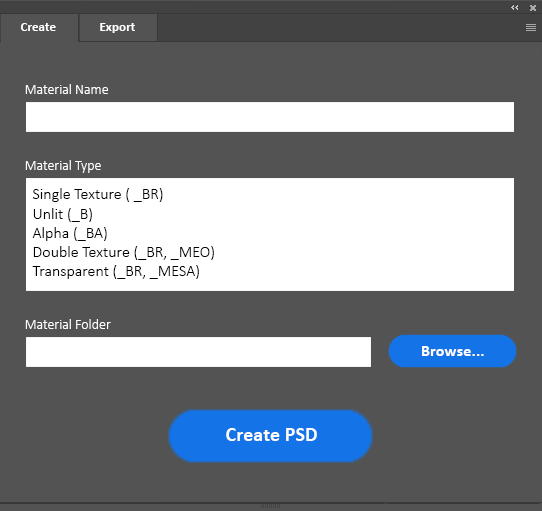
<style>
.page{position:relative;width:542px;height:511px;background:#535353}
.page>*{position:absolute;margin:0}
.t1{font:13.2px "Calibri-Bold";color:#ffffff}
.t2{font:14px "Calibri-Light";color:#ffffff}
.t3{font:16px "Calibri-Light";color:#000000}
.t4{font:16.4px "Calibri-Bold";color:#ffffff}
.t5{font:20.2px "Calibri-Bold";color:#ffffff}
</style>
<div class="page">
<p class="t1" style="left:20px;top:23px;width:36px;height:8px">Create</p>
<p class="t1" style="left:100px;top:23px;width:35px;height:10px">Export</p>
<p class="t2" style="left:25px;top:84px;width:83px;height:10px">Material Name</p>
<p class="t2" style="left:25px;top:160px;width:76px;height:13px">Material Type</p>
<p class="t3" style="left:32px;top:188px;width:182px;height:91px">Single Texture ( _BR)<br>Unlit (_B)<br>Alpha (_BA)<br>Double Texture (_BR, _MEO)<br>Transparent (_BR, _MESA)</p>
<p class="t2" style="left:25px;top:319px;width:86px;height:10px">Material Folder</p>
<p class="t4" style="left:422px;top:346px;width:62px;height:10px">Browse...</p>
<p class="t5" style="left:226px;top:428px;width:91px;height:13px">Create PSD</p>
</div>
